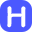
<style>
.page{position:relative;width:32px;height:32px;background:#4b58ff}
.page>*{position:absolute;margin:0}
.t1{font:27.1px "DFNewChuan-Md-HK-BF";color:#ffffff;scale:1.54 1}
</style>
<div class="page">
<p class="t1" style="left:8px;top:7px;width:17px;height:20px">H</p>
</div>
